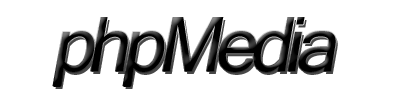
<style>
.page{position:relative;width:400px;height:100px;background:#ffffff}
.page>*{position:absolute;margin:0}
.t1{font:84px "Vrinda";letter-spacing:-0.08em;font-style:italic}
</style>
<div class="page">
<p class="t1" style="left:53px;top:17px;width:283px;height:69px">phpMedia</p>
</div>
